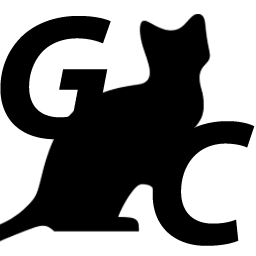
<style>
.page{position:relative;width:256px;height:256px;background:#ffffff}
.page>*{position:absolute;margin:0}
.t1{font:179.2px "MyriadPro-BoldIt";color:#000000}
</style>
<div class="page">
<p class="t1" style="left:0px;top:16px;width:111px;height:124px">G</p>
<p class="t1" style="left:152px;top:121px;width:103px;height:125px">C</p>
</div>
